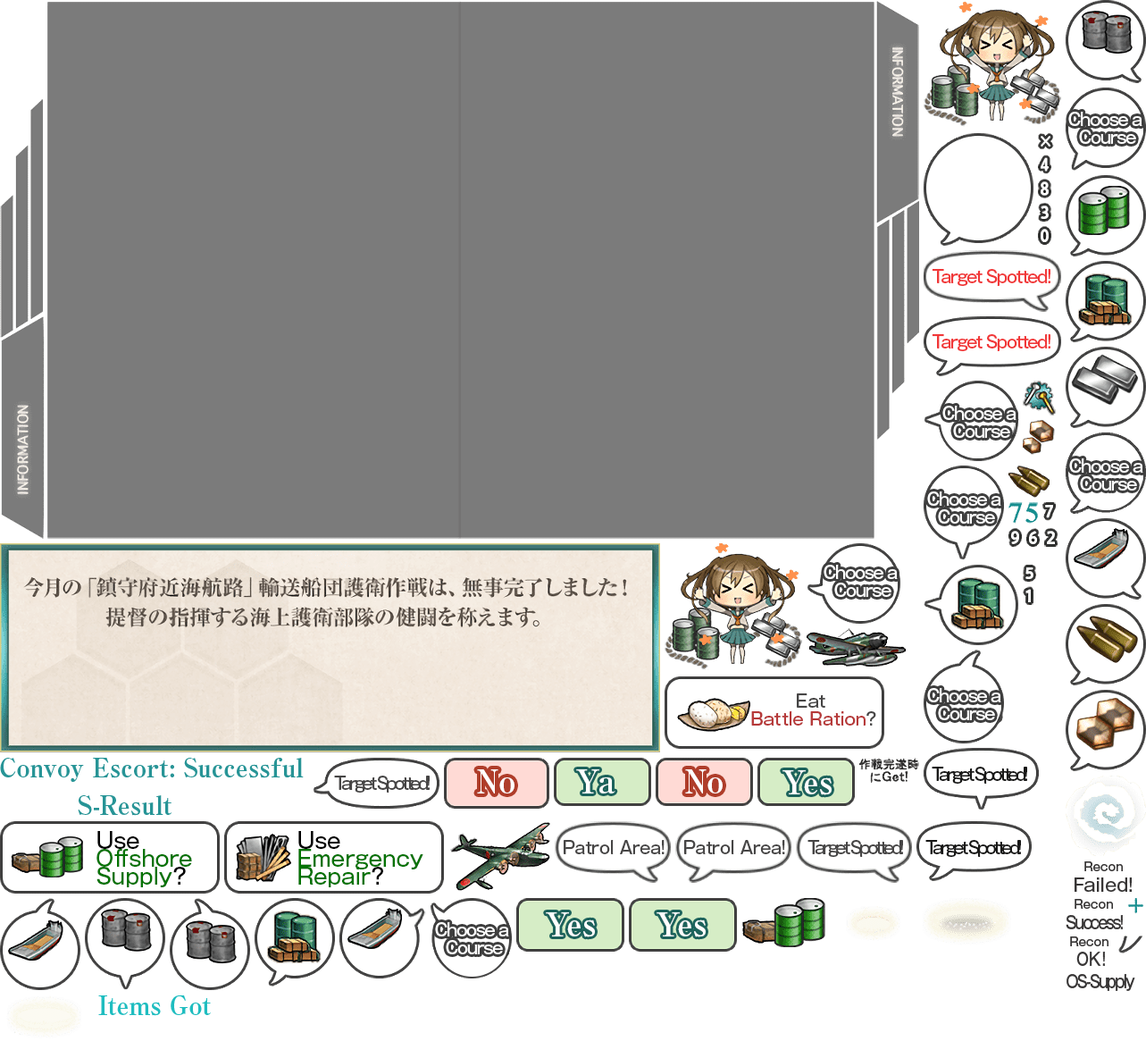
<style>
.page{position:relative;width:1146px;height:1041px;background:#7b7b7b}
.page>*{position:absolute;margin:0}
.t1{font:17px/17.9px "GothicMB101Pro-Medium";letter-spacing:-0.08em;color:#ffffff;scale:0.95 1}
.t2{font:17px "GothicMB101Pro-Medium";letter-spacing:-0.08em;color:#f13738;scale:0.95 1}
.t3{font:17px/17.9px "GothicMB101Pro-Medium";color:#b63939;scale:0.95 1}
.t4{font:17px/17.9px "GothicMB101Pro-Medium";color:#464545;scale:0.95 1}
.t5{font:25.9px "RyuminPro-ExBold";color:#279496;scale:0.95 1}
.t6{font:32.2px "RyuminPro-ExBold";color:#ffffff;scale:0.95 1}
.t7{font:17px "GothicMB101Pro-Medium";letter-spacing:-0.18em;color:#181817;scale:0.95 1}
.t8{font:17px "GothicMB101Pro-Medium";letter-spacing:-0.18em;color:#464545;scale:0.95 1}
.t9{font:21.4px/17.9px "GothicMB101Pro-Medium";color:#037302;scale:0.95 1}
.t10{font:21.4px/17.9px "GothicMB101Pro-Medium";color:#000000;scale:0.95 1}
.t11{font:17px "GothicMB101Pro-Medium";letter-spacing:-0.02em;color:#464545;scale:0.95 1}
.t12{font:11.6px "GothicMB101Pro-Medium";color:#373535;scale:0.95 1}
.t13{font:17.9px "GothicMB101Pro-Medium";color:#373535;scale:0.95 1}
.t14{font:17.9px "GothicMB101Pro-Medium";letter-spacing:-0.14em;color:#373535;scale:0.8 1}
.t15{font:17.9px "GothicMB101Pro-Medium";color:#373535;scale:0.8 1}
.t16{font:17.9px "GothicMB101Pro-Medium";letter-spacing:-0.12em;color:#373535;scale:0.8 1}
.t17{font:25.9px "RyuminPro-ExBold";color:#1fbdc0;scale:0.95 1}
</style>
<div class="page">
<p class="t1" style="left:1068px;top:112px;width:74px;height:32px;text-align:center">Choose a<br> Course</p>
<p class="t2" style="left:932px;top:269px;width:118px;height:17px">Target Spotted!</p>
<p class="t2" style="left:932px;top:334px;width:118px;height:17px">Target Spotted!</p>
<p class="t1" style="left:942px;top:406px;width:74px;height:32px;text-align:center">Choose a<br> Course</p>
<p class="t1" style="left:1069px;top:458px;width:74px;height:32px;text-align:center">Choose a<br> Course</p>
<p class="t1" style="left:927px;top:491px;width:74px;height:32px;text-align:center">Choose a<br> Course</p>
<p class="t1" style="left:824px;top:564px;width:74px;height:33px;text-align:center">Choose a<br> Course</p>
<p class="t1" style="left:927px;top:688px;width:74px;height:32px;text-align:center">Choose a<br> Course</p>
<p class="t3" style="left:751px;top:693px;width:125px;height:32px;text-align:center"><span class="t4">Eat <br></span>Battle Ration<span class="t4">?</span></p>
<p class="t5" style="left:0px;top:757px;width:304px;height:25px">Convoy Escort: Successful</p>
<p class="t6" style="left:477px;top:769px;width:37px;height:24px">No</p>
<p class="t6" style="left:576px;top:769px;width:39px;height:24px">Ya</p>
<p class="t6" style="left:685px;top:769px;width:38px;height:24px">No</p>
<p class="t6" style="left:782px;top:770px;width:50px;height:25px">Yes</p>
<p class="t7" style="left:932px;top:766px;width:95px;height:17px">Target Spotted!</p>
<p class="t8" style="left:334px;top:775px;width:96px;height:17px">Target Spotted!</p>
<p class="t5" style="left:78px;top:795px;width:94px;height:20px">S-Result</p>
<p class="t9" style="left:96px;top:831px;width:96px;height:56px"><span class="t10">Use <br></span>Offshore<br>Supply<span class="t10">?</span></p>
<p class="t9" style="left:298px;top:831px;width:125px;height:56px"><span class="t10">Use <br></span>Emergency <br>Repair<span class="t10">?</span></p>
<p class="t11" style="left:564px;top:840px;width:101px;height:14px">Patrol Area!</p>
<p class="t11" style="left:684px;top:840px;width:101px;height:14px">Patrol Area!</p>
<p class="t8" style="left:807px;top:840px;width:96px;height:17px">Target Spotted!</p>
<p class="t7" style="left:925px;top:840px;width:96px;height:17px">Target Spotted!</p>
<p class="t12" style="left:1084px;top:861px;width:39px;height:10px">Recon</p>
<p class="t13" style="left:1074px;top:877px;width:58px;height:14px">Failed!</p>
<p class="t12" style="left:1074px;top:899px;width:39px;height:9px">Recon</p>
<p class="t6" style="left:546px;top:912px;width:49px;height:25px">Yes</p>
<p class="t6" style="left:656px;top:912px;width:50px;height:25px">Yes</p>
<p class="t14" style="left:1066px;top:915px;width:57px;height:14px">Success!</p>
<p class="t1" style="left:435px;top:922px;width:74px;height:32px;text-align:center">Choose a<br> Course</p>
<p class="t12" style="left:1070px;top:936px;width:38px;height:10px">Recon</p>
<p class="t15" style="left:1076px;top:951px;width:29px;height:15px">OK!</p>
<p class="t16" style="left:1066px;top:974px;width:69px;height:17px">OS-Supply</p>
<p class="t17" style="left:98px;top:994px;width:113px;height:22px">Items Got</p>
</div>
